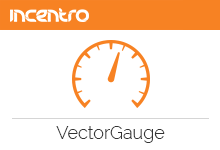
<style>
.page{position:relative;width:220px;height:150px;background:#ffffff}
.page>*{position:absolute;margin:0}
.t1{font:18px "Raleway-Light";color:#333333}
</style>
<div class="page">
<p class="t1" style="left:56px;top:126px;width:109px;height:17px">VectorGauge</p>
</div>
